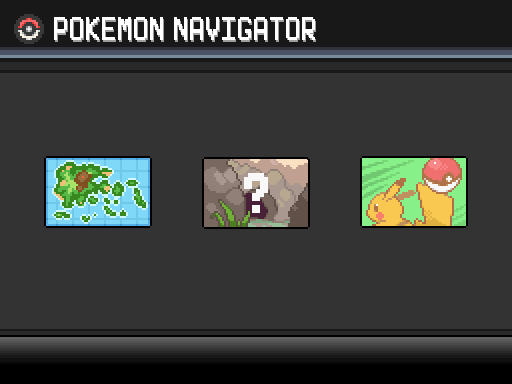
<style>
.page{position:relative;width:512px;height:384px;background:#333333}
.page>*{position:absolute;margin:0}
.t1{font:32px "Power-Green";color:#ffffff;font-weight:bold}
</style>
<div class="page">
<p class="t1" style="left:54px;top:17px;width:261px;height:23px">POKEMON NAVIGATOR</p>
</div>
